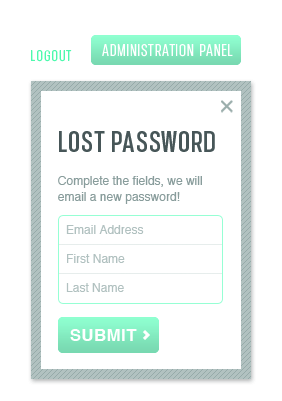
<style>
.page{position:relative;width:282px;height:401px;background:#ffffff}
.page>*{position:absolute;margin:0}
.t1{font:15px "ChromadicaCondensed";letter-spacing:0.08em;color:#4ef9ae}
.t2{font:12px/33px "Helvetica";color:#899d9c}
.t3{font:30px/42px "ChromadicaBoldCondensed";letter-spacing:0.02em;color:#475658}
.t4{font:12px/16px "Helvetica";color:#899d9c}
.t5{font:12px/18px "Helvetica";color:#b1c1c0}
.t6{font:12px/29px "Helvetica";color:#b1c1c0}
.t7{font:17px/49px "Helvetica-Bold";letter-spacing:0.02em;color:#ffffff}
</style>
<div class="page">
<p class="t1" style="left:31px;top:50px;width:41px;height:12px">LOGOUT</p>
<p class="t2" style="left:58px;top:131px;width:157px;height:210px"><span class="t3">LOST PASSWORD<br></span>Complete the fields, we will <span class="t4">email a new password!<br> <br></span><span class="t5">Email Address<br></span><span class="t6">First Name<br>Last Name<br></span><span class="t7">SUBMIT</span></p>
</div>
